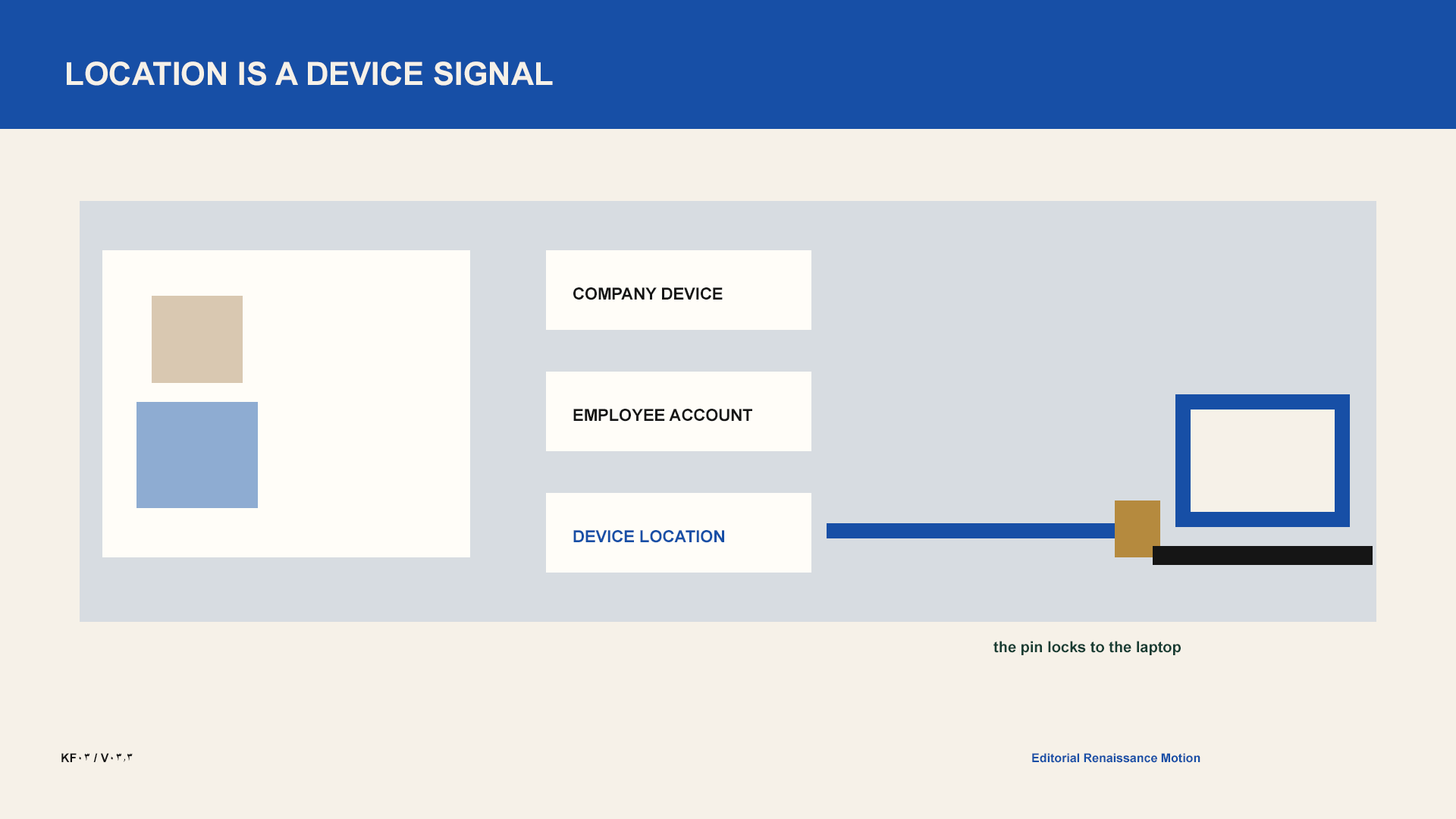
<style>
.page{position:relative;width:1456px;height:819px;background:#f6f1e8}
.page>*{position:absolute;margin:0}
.t1{font:31.8px "Arial-BoldMT";color:#f6f1e8}
.t2{font:16.7px "Arial-BoldMT";color:#151515}
.t3{font:16.7px "Arial-BoldMT";color:#174fa6}
.t4{font:15.2px "Arial-BoldMT";color:#173c32}
.t5{font:12.1px "Arial-BoldMT";color:#151515}
.t6{font:12.1px "Arial-BoldMT";color:#174fa6}
</style>
<div class="page">
<p class="t1" style="left:67px;top:61px;width:486px;height:25px">LOCATION IS A DEVICE SIGNAL</p>
<p class="t2" style="left:573px;top:287px;width:150px;height:13px">COMPANY DEVICE</p>
<p class="t2" style="left:573px;top:409px;width:179px;height:13px">EMPLOYEE ACCOUNT</p>
<p class="t3" style="left:573px;top:530px;width:151px;height:13px">DEVICE LOCATION</p>
<p class="t4" style="left:993px;top:641px;width:188px;height:14px">the pin locks to the laptop</p>
<p class="t5" style="left:61px;top:753px;width:72px;height:9px">KF03 / V03.3</p>
<p class="t6" style="left:1032px;top:753px;width:168px;height:10px">Editorial Renaissance Motion</p>
</div>
